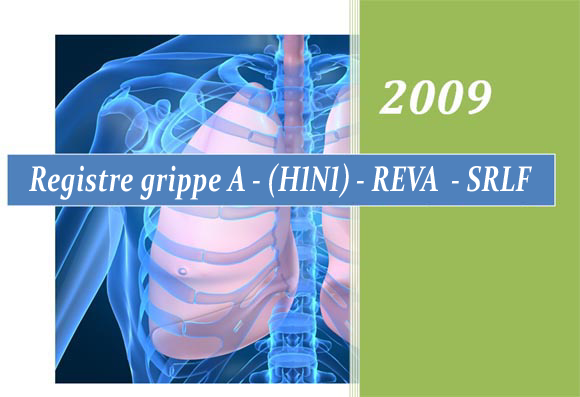
<style>
.page{position:relative;width:580px;height:397px;background:#9bbb58}
.page>*{position:absolute;margin:0}
.t1{font:36px "Constantia-BoldItalic";letter-spacing:0.01em;color:#ffffff;scale:0.74 1}
</style>
<div class="page">
<p class="t1" style="left:29px;top:163px;width:503px;height:37px">Registre grippe A - (H1N1) - REVA  - SRLF</p>
</div>
